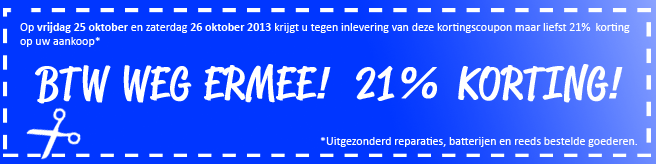
<style>
.page{position:relative;width:656px;height:164px;background:#0036ff}
.page>*{position:absolute;margin:0}
.t1{font:12px "Calibri";color:#ffffff}
.t2{font:12px "Calibri-Bold";color:#ffffff}
.t3{font:45px "ReklameScript-RegularDEMO";letter-spacing:0.05em;color:#ffffff;font-weight:bold}
.t4{font:45px "Rockwell-Italic";letter-spacing:0.05em;color:#ffffff;font-weight:bold}
</style>
<div class="page">
<p class="t1" style="left:20px;top:22px;width:610px;height:25px">Op<span class="t2"> vrijdag 25 oktober</span> en zaterdag <span class="t2">26 oktober 2013</span> krijgt u tegen inlevering van deze kortingscoupon maar liefst 21%  korting <br>op uw aankoop*</p>
<p class="t3" style="left:35px;top:64px;width:588px;height:40px">BTW WEG ERMEE<span class="t4">!  </span>21<span class="t4">% </span>KORTING<span class="t4">!</span></p>
<p class="t1" style="left:320px;top:137px;width:317px;height:10px">*Uitgezonderd reparaties, batterijen en reeds bestelde goederen.</p>
</div>
